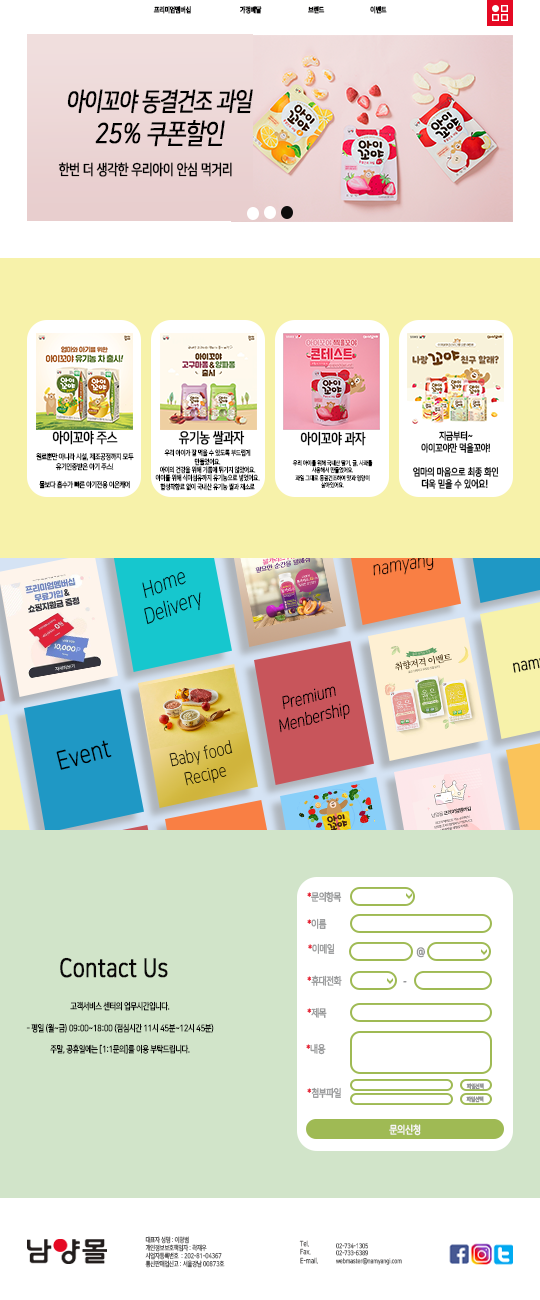
<style>
.page{position:relative;width:540px;height:1300px;background:#ffffff}
.page>*{position:absolute;margin:0}
.t1{font:7.3px "NanumSquare_acR";color:#09090a;font-weight:bold;scale:0.81 1}
.t2{font:25px "NanumSquare_acR";letter-spacing:-0.025em;color:#000000;font-weight:bold;font-style:italic;scale:0.81 1}
.t3{font:27.5px "NanumSquare_acR";letter-spacing:-0.025em;color:#000000;font-weight:bold;font-style:italic;scale:0.81 1}
.t4{font:14.6px "NanumSquare_acR";color:#000000;font-weight:bold;scale:0.81 1}
.t5{font:14.3px "NanumSquare_acR";color:#000000;font-weight:bold;scale:0.81 1}
.t6{font:10px "NanumSquare_acR";color:#000000;font-weight:bold;scale:0.81 1}
.t7{font:6.9px "NanumSquare_acR";color:#000000;scale:0.81 1}
.t8{font:7.6px "NanumSquare_acR";color:#000000;scale:0.81 1}
.t9{font:6.2px "NanumSquare_acR";color:#000000;scale:0.81 1}
.t10{font:18.8px "NanumSquare_acL";color:#000000;font-style:italic;scale:0.81 1}
.t11{font:21.3px "NanumSquare_acL";font-style:italic;scale:0.81 1}
.t12{font:17.2px "NanumSquare_acL";color:#000000;font-style:italic;scale:0.81 1}
.t13{font:25.1px "NanumSquare_acL";color:#000000;font-weight:bold;scale:0.81 1}
.t14{font:17.7px "NanumSquare_acL";scale:0.81 1}
.t15{font:10.4px "NanumSquare_acR";color:#969798;font-weight:bold;scale:0.81 1}
.t16{font:10.4px "NanumSquare_acR";color:#e50923;font-weight:bold;scale:0.81 1}
.t17{font:10.4px "NanumSquare_acR";color:#e5122a;font-weight:bold;scale:0.81 1}
.t18{font:10.4px "NanumSquare_acR";color:#8d8e90;font-weight:bold;scale:0.81 1}
.t19{font:25.6px "NanumSquare_acR";color:#090808;font-weight:bold;scale:0.81 1}
.t20{font:9px "NanumSquare_acR";color:#090808;scale:0.81 1}
.t21{font:5.8px "NanumSquare_acR";color:#969798;font-weight:bold;scale:0.81 1}
.t22{font:10.8px "NanumSquare_acR";color:#f9f7f7;font-weight:bold;scale:0.81 1}
.t23{font:6.7px "NanumSquare_acR";color:#5f5e5e;scale:0.81 1}
.t24{font:7.1px "NanumSquare_acR";color:#5f5e5e;scale:0.81 1}
.t25{font:6.4px "NanumSquare_acR";color:#5f5e5e;scale:0.81 1}
</style>
<div class="page">
<p class="t1" style="left:153px;top:6px;width:38px;height:8px">프리미엄멤버십</p>
<p class="t1" style="left:240px;top:6px;width:22px;height:8px">가정배달</p>
<p class="t1" style="left:308px;top:6px;width:17px;height:8px">브랜드</p>
<p class="t1" style="left:370px;top:6px;width:17px;height:8px">이벤트</p>
<p class="t2" style="left:67px;top:89px;width:186px;height:58px;text-align:center">아이꼬야 동결건조 과일<br><span class="t3">25% 쿠폰할인</span></p>
<p class="t4" style="left:58px;top:162px;width:174px;height:15px">한번 더 생각한 우리아이 안심 먹거리</p>
<p class="t5" style="left:52px;top:430px;width:66px;height:15px">아이꼬야 주스</p>
<p class="t5" style="left:178px;top:430px;width:67px;height:15px">유기농 쌀과자</p>
<p class="t5" style="left:300px;top:431px;width:66px;height:15px">아이꼬야 과자</p>
<p class="t6" style="left:413px;top:431px;width:86px;height:58px;text-align:center">지금부터~<br>아이꼬야만 먹을꼬야!<br><br>엄마의 마음으로 최종 화인<br>더욱 믿을 수 있어요!</p>
<p class="t7" style="left:155px;top:449px;width:105px;height:42px;text-align:center">우리 아이가 잘 먹을 수 있도록 부드럽게 만들었어요.<br>아이의 건강을 위해 기름에 튀기지 않았어요.<br>아이를 위해 식이섬유까지 유기농으로 넣었어요.<br>합성착향료 없이 국내산 유기농 쌀과 채소로 만들어 건강해요.</p>
<p class="t8" style="left:36px;top:453px;width:98px;height:36px;text-align:center">원료뿐만 아니라 시설, 제조공정까지 모두 유기인증받은 아기 주스!<br><br>물보다 흡수가 빠른 아기전용 이온케어</p>
<p class="t9" style="left:292px;top:460px;width:81px;height:28px;text-align:center">우리 아이를 위해 국내산 딸기, 귤, 사과를 사용해서 만들었어요.<br>과일 그대로 동결건조하여 맛과 영양이 살아있어요.</p>
<p class="t10" style="left:373px;top:555px;width:61px;height:21px;rotate:-10deg">namyang</p>
<p class="t11" style="left:142px;top:572px;width:59px;height:53px;text-align:center;rotate:-20deg">Home<br>Delivery</p>
<p class="t12" style="left:279px;top:686px;width:71px;height:47px;text-align:center;rotate:-15deg">Premium<br>Menbership</p>
<p class="t13" style="left:56px;top:740px;width:56px;height:30px;rotate:-14deg">Event</p>
<p class="t14" style="left:169px;top:740px;width:64px;height:46px;text-align:center;rotate:-12deg">Baby food<br>Recipe</p>
<p class="t15" style="left:307px;top:891px;width:35px;height:12px"><span class="t16">*</span>문의항목</p>
<p class="t15" style="left:307px;top:918px;width:20px;height:11px"><span class="t16">*</span>이름</p>
<p class="t15" style="left:308px;top:943px;width:27px;height:11px"><span class="t17">*</span>이메일</p>
<p class="t18" style="left:416px;top:947px;width:9px;height:11px">@</p>
<p class="t19" style="left:60px;top:957px;width:108px;height:21px">Contact Us</p>
<p class="t15" style="left:307px;top:975px;width:35px;height:11px"><span class="t17">*</span>휴대전화</p>
<p class="t18" style="left:403px;top:981px;width:4px;height:2px">-</p>
<p class="t20" style="left:26px;top:1001px;width:188px;height:53px;text-align:center">고객서비스 센터의 업무시간입니다.<br><br>- 평일 (월~금) 09:00~18:00 (점심시간 11시 45분~12시 45분)<br><br>주말, 공휴일에는 [1:1문의]를 이용 부탁드립니다.</p>
<p class="t15" style="left:307px;top:1007px;width:20px;height:11px"><span class="t17">*</span>제목</p>
<p class="t15" style="left:306px;top:1043px;width:20px;height:12px"><span class="t17">*</span>내용</p>
<p class="t21" style="left:466px;top:1083px;width:18px;height:7px">파일선택</p>
<p class="t15" style="left:307px;top:1087px;width:34px;height:11px"><span class="t17">*</span>첨부파일</p>
<p class="t21" style="left:466px;top:1096px;width:18px;height:7px">파일선택</p>
<p class="t22" style="left:389px;top:1124px;width:32px;height:12px">문의신청</p>
<p class="t23" style="left:145px;top:1236px;width:80px;height:32px">대표자 성명 : 이광범<br>개인정보보호책임자 : 곽재우    <br>사업자등록번호  : 202-81-04367 <br>통신판매업신고 : 서울강남 00873호</p>
<p class="t24" style="left:299px;top:1240px;width:19px;height:24px">Tel.<br>Fax.<br>E-mail.</p>
<p class="t25" style="left:336px;top:1243px;width:66px;height:22px">02-734-1305<br>02-733-6389<br>webmaster@namyangi.com</p>
</div>
